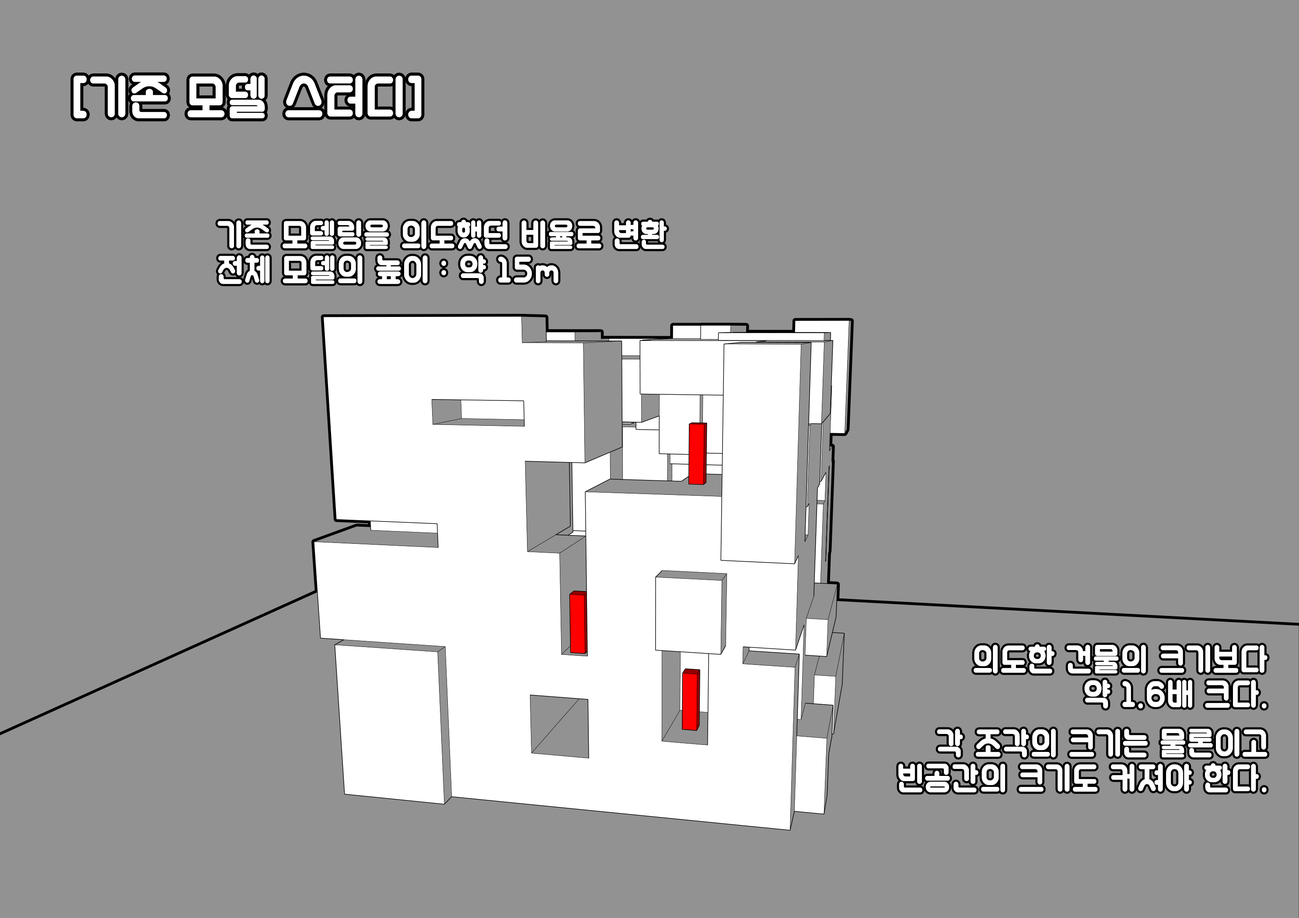
<style>
.page{position:relative;width:1299px;height:918px;background:#929292}
.page>*{position:absolute;margin:0}
.t1{font:53px "GeekbleMalang2";letter-spacing:0.04em;color:#ffffff;scale:0.9 1}
.t2{font:35.3px/35px "GeekbleMalang2";letter-spacing:0.04em;color:#ffffff;scale:0.9 1}
</style>
<div class="page">
<p class="t1" style="left:73px;top:75px;width:349px;height:43px">[기존 모델 스터디]</p>
<p class="t2" style="left:217px;top:219px;width:450px;height:65px">기존 모델링을 의도했던 비율로 변환<br>전체 모델의 높이 : 약 15m</p>
<p class="t2" style="left:973px;top:645px;width:294px;height:64px;text-align:right">의도한 건물의 크기보다<br>약 1.6배 크다.</p>
<p class="t2" style="left:898px;top:729px;width:369px;height:64px;text-align:right">각 조각의 크기는 물론이고<br>빈공간의 크기도 커져야 한다.</p>
</div>
